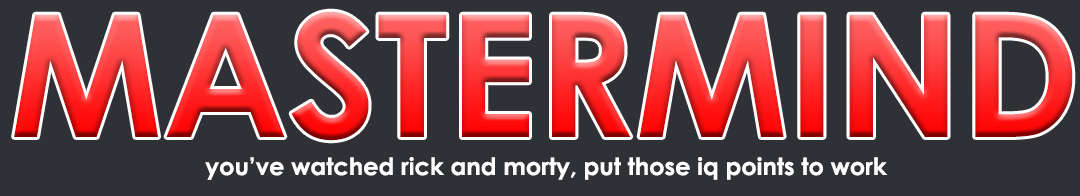
<style>
.page{position:relative;width:1080px;height:196px;background:#2f3136}
.page>*{position:absolute;margin:0}
.t1{font:170px "CenturyGothic-Bold"}
.t2{font:24px "CenturyGothic-Bold";color:#ffffff}
</style>
<div class="page">
<p class="t1" style="left:14px;top:11px;width:1059px;height:130px">MASTERMIND</p>
<p class="t2" style="left:205px;top:157px;width:683px;height:23px">you’ve watched rick and morty, put those iq points to work</p>
</div>
